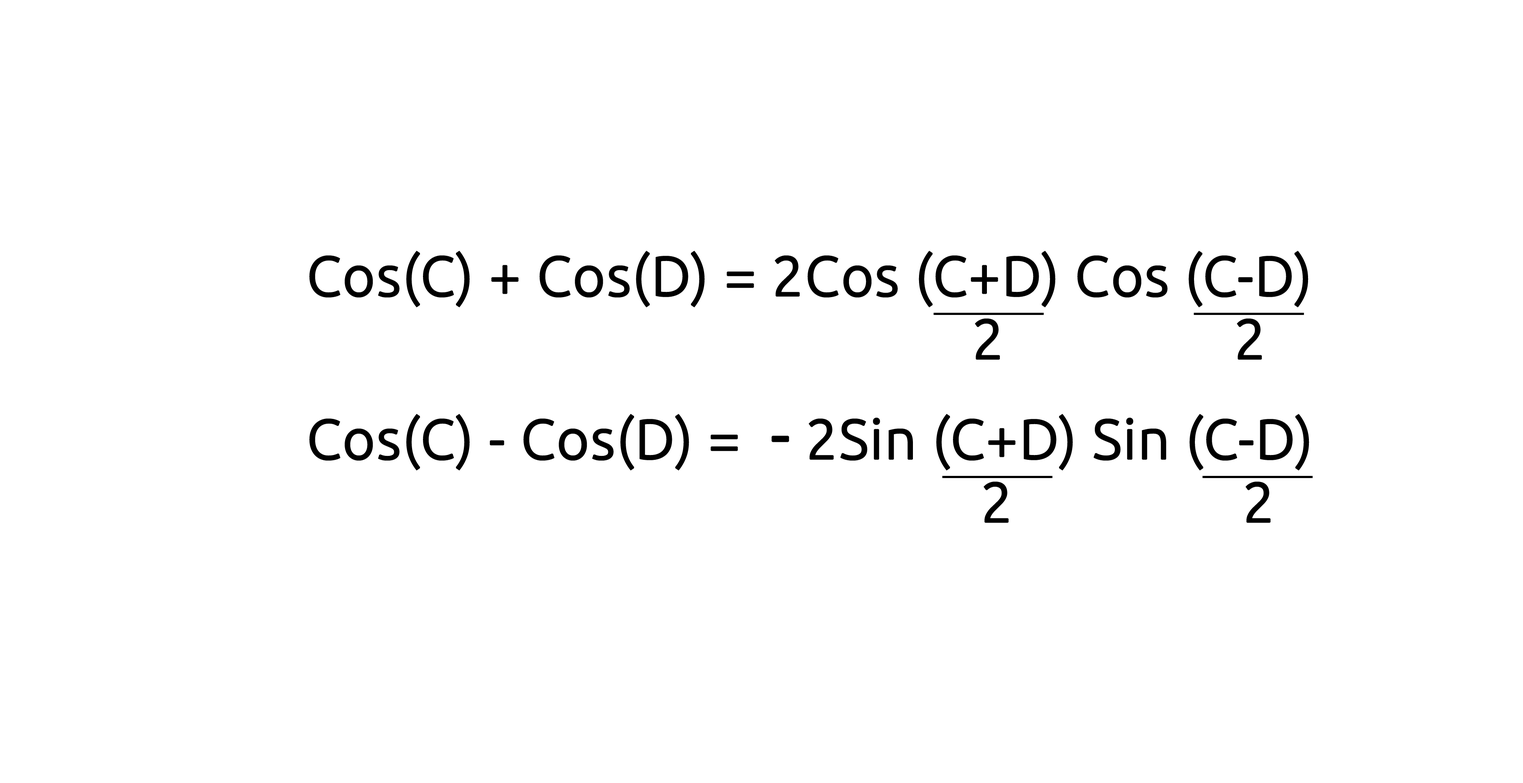
<style>
.page{position:relative;width:1523px;height:783px;background:#ffffff}
.page>*{position:absolute;margin:0}
.t1{font:56.2px "Ubuntu-Light";color:#000000;font-weight:bold}
.t2{font:68.9px "Ubuntu-Light";color:#000000;font-weight:bold}
</style>
<div class="page">
<p class="t1" style="left:309px;top:251px;width:999px;height:57px">Cos(C) + Cos(D) = 2Cos (C+D) Cos (C-D)</p>
<p class="t1" style="left:975px;top:318px;width:25px;height:42px">2</p>
<p class="t1" style="left:1236px;top:318px;width:26px;height:42px">2</p>
<p class="t1" style="left:309px;top:414px;width:1000px;height:57px">Cos(C) - Cos(D) =  <span class="t2">-</span> 2Sin (C+D) Sin (C-D)</p>
<p class="t1" style="left:983px;top:482px;width:25px;height:41px">2</p>
<p class="t1" style="left:1245px;top:482px;width:25px;height:41px">2</p>
</div>
